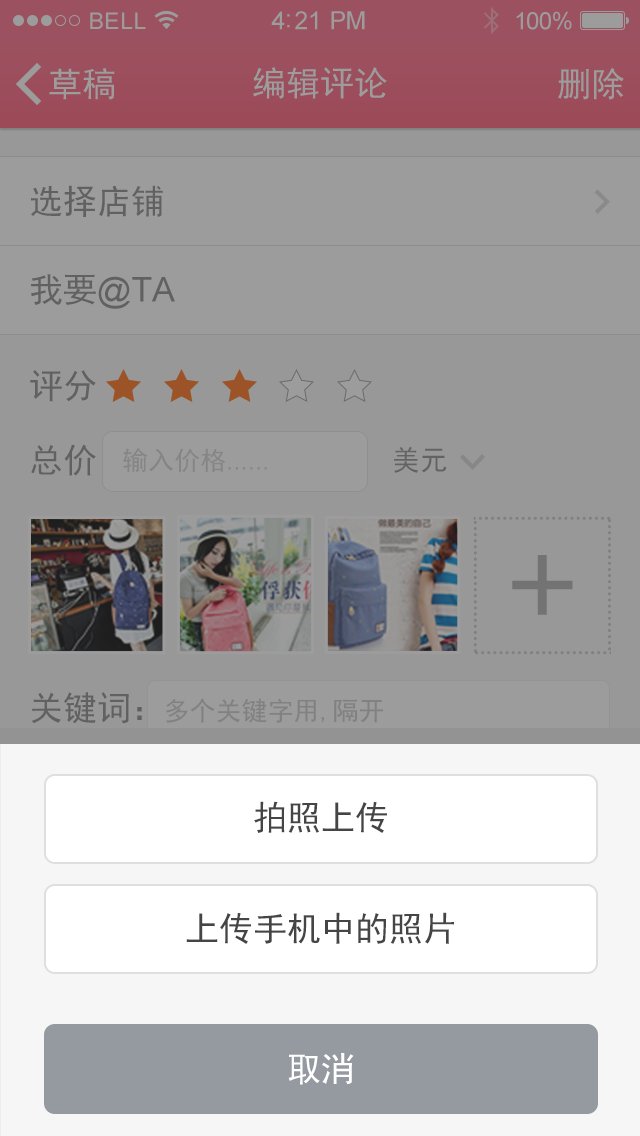
<style>
.page{position:relative;width:640px;height:1136px;background:#989898}
.page>*{position:absolute;margin:0}
.t1{font:34px "SimHei";color:#616161}
.t2{font:34px "ArialMT";color:#616161}
.t3{font:26px "ArialMT";color:#858585}
.t4{font:26px "SimHei";color:#858585}
.t5{font:28px "SimHei";color:#636363}
.t6{font:133.7px "SimHei";color:#737373}
.t7{font:18px "SimHei";color:#5c667f}
.t8{font:26px "SimHei";color:#818181}
.t9{font:34px "SimHei";color:#454545}
.t10{font:34px "SimHei";color:#ffffff}
</style>
<div class="page">
<p class="t1" style="left:31px;top:185px;width:132px;height:32px">选择店铺</p>
<p class="t2" style="left:31px;top:274px;width:144px;height:35px"><span class="t1">我要</span>@TA</p>
<p class="t1" style="left:30px;top:370px;width:66px;height:32px">评分</p>
<p class="t1" style="left:31px;top:444px;width:65px;height:32px">总价</p>
<p class="t3" style="left:123px;top:448px;width:144px;height:25px"><span class="t4">输入价格</span>......</p>
<p class="t5" style="left:394px;top:446px;width:53px;height:27px">美元</p>
<p class="t6" style="left:512px;top:555px;width:61px;height:60px">+</p>
<p class="t7" style="left:360px;top:622px;width:9px;height:9px">+</p>
<p class="t1" style="left:31px;top:692px;width:111px;height:32px">关键词：</p>
<p class="t8" style="left:166px;top:698px;width:218px;height:25px">多个关键字用,隔开</p>
<p class="t9" style="left:254px;top:801px;width:133px;height:32px">拍照上传</p>
<p class="t9" style="left:186px;top:912px;width:268px;height:32px">上传手机中的照片</p>
<p class="t10" style="left:288px;top:1053px;width:66px;height:32px">取消</p>
</div>
